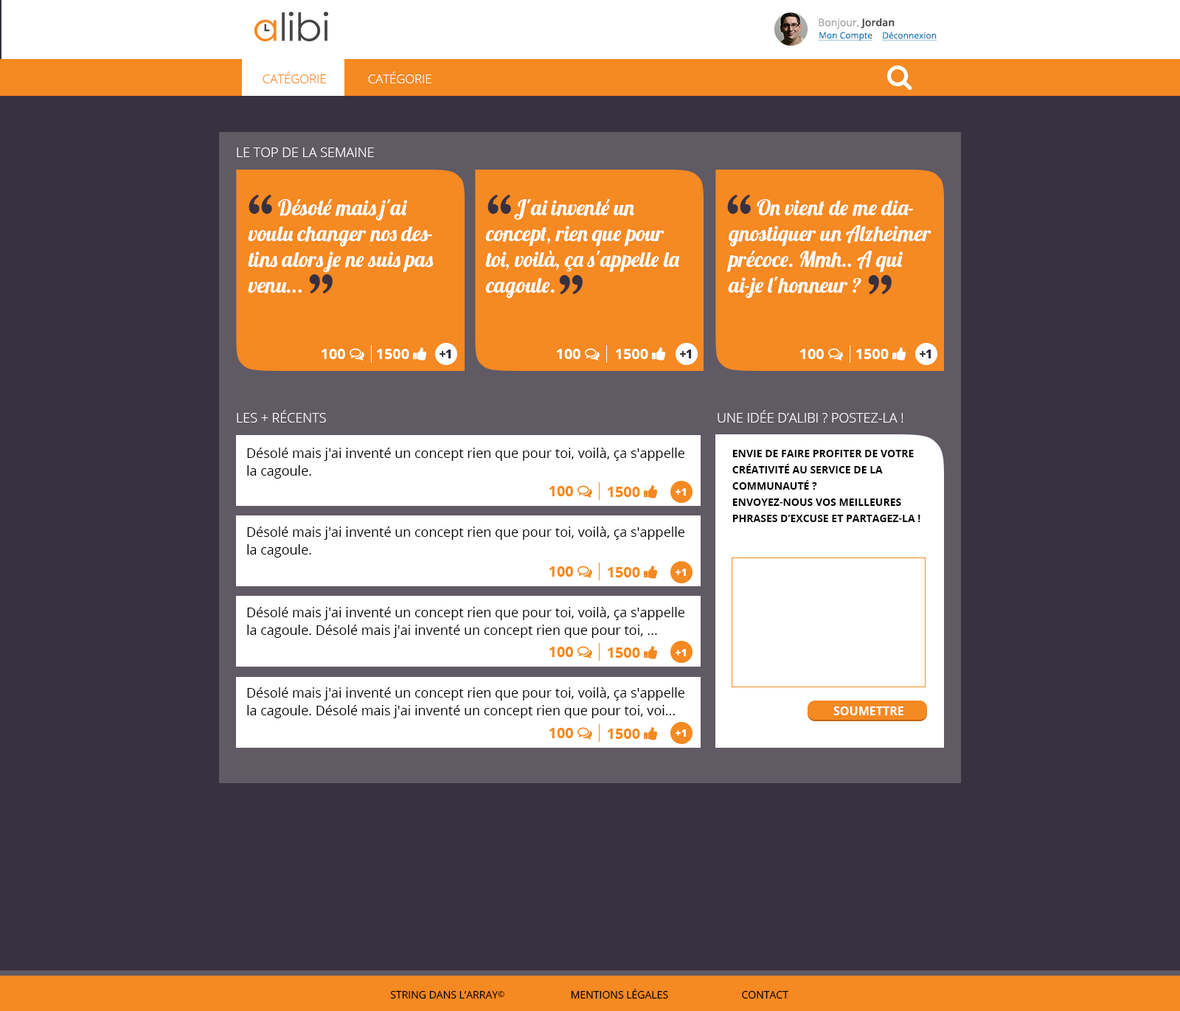
<style>
.page{position:relative;width:1180px;height:1011px;background:#38313f}
.page>*{position:absolute;margin:0}
.t1{font:10.3px "OpenSans";color:#a2a2a2}
.t2{font:10.3px "OpenSans-Semibold";color:#444444}
.t3{font:8.8px "OpenSans";color:#0f7ab4;text-decoration:underline}
.t4{font:12.3px "OpenSans-Light";color:#f58922;text-transform:uppercase}
.t5{font:12.3px "OpenSans-Light";color:#ffffff;text-transform:uppercase}
.t6{font:13.3px "OpenSans-Light";color:#ffffff;text-transform:uppercase}
.t7{font:54.6px "HoeflerText-Black";letter-spacing:-0.08em;color:#38313f;text-transform:uppercase}
.t8{font:21.4px "Lobster1.4";color:#ffffff}
.t9{font:14.7px "OpenSans-Extrabold";color:#ffffff;text-transform:uppercase}
.t10{font:11.8px "OpenSans-Extrabold";letter-spacing:-0.025em;color:#38313f;text-transform:uppercase}
.t11{font:13.3px/17.7px "OpenSans";color:#000000}
.t12{font:10.3px/16.2px "OpenSans-Bold";color:#000000;text-transform:uppercase}
.t13{font:10.3px "OpenSans-Extrabold";color:#ffffff;text-transform:uppercase}
.t14{font:11.8px "OpenSans-Bold";color:#ffffff;text-transform:uppercase}
.t15{font:10.3px "OpenSans";color:#000000;text-transform:uppercase}
.t16{font:8.1px "OpenSans";color:#000000;text-transform:uppercase}
</style>
<div class="page">
<p class="t1" style="left:818px;top:18px;width:76px;height:11px">Bonjour, <span class="t2">Jordan</span></p>
<p class="t3" style="left:818px;top:32px;width:54px;height:9px">Mon Compte</p>
<p class="t3" style="left:882px;top:32px;width:55px;height:9px">Déconnexion</p>
<p class="t4" style="left:262px;top:72px;width:64px;height:11px">Catégorie</p>
<p class="t5" style="left:368px;top:72px;width:63px;height:11px">Catégorie</p>
<p class="t6" style="left:237px;top:147px;width:137px;height:10px">LE top de la Semaine</p>
<p class="t7" style="left:248px;top:195px;width:24px;height:19px">“</p>
<p class="t7" style="left:487px;top:195px;width:24px;height:19px">“</p>
<p class="t7" style="left:727px;top:195px;width:24px;height:19px">“</p>
<p class="t8" style="left:248px;top:199px;width:186px;height:94px"><span class="t9">    </span>   Désolé mais j'ai voulu changer nos destins alors je ne suis pas venu...</p>
<p class="t8" style="left:485px;top:199px;width:195px;height:100px">J'ai inventé un concept, rien que pour toi, voilà, ça s'appelle la cagoule.</p>
<p class="t8" style="left:726px;top:199px;width:205px;height:100px">On vient de me diagnostiquer un Alzheimer<br>précoce. Mmh.. A qui<br>ai-je l'honneur ?</p>
<p class="t7" style="left:309px;top:274px;width:24px;height:19px;rotate:180deg">“</p>
<p class="t7" style="left:559px;top:275px;width:23px;height:19px;rotate:180deg">“</p>
<p class="t7" style="left:868px;top:275px;width:23px;height:19px;rotate:180deg">“</p>
<p class="t10" style="left:439px;top:349px;width:12px;height:9px">+1</p>
<p class="t10" style="left:680px;top:349px;width:12px;height:9px">+1</p>
<p class="t10" style="left:919px;top:349px;width:12px;height:9px">+1</p>
<p class="t6" style="left:237px;top:410px;width:89px;height:12px">Les + récents</p>
<p class="t6" style="left:717px;top:410px;width:186px;height:12px">Une idée d’alibi ? Postez-la !</p>
<p class="t11" style="left:247px;top:448px;width:437px;height:31px">Désolé mais j'ai inventé un concept rien que pour toi, voilà, ça s'appelle la cagoule.</p>
<p class="t12" style="left:732px;top:450px;width:188px;height:72px">Envie de faire profiter de votre créativité au service de la communauté ?<br>Envoyez-nous vos meilleures phrases d’excuse et partagez-la !</p>
<p class="t13" style="left:675px;top:488px;width:11px;height:7px">+1</p>
<p class="t11" style="left:247px;top:526px;width:437px;height:31px">Désolé mais j'ai inventé un concept rien que pour toi, voilà, ça s'appelle la cagoule.</p>
<p class="t13" style="left:675px;top:568px;width:11px;height:8px">+1</p>
<p class="t11" style="left:247px;top:607px;width:437px;height:31px">Désolé mais j'ai inventé un concept rien que pour toi, voilà, ça s'appelle la cagoule. Désolé mais j'ai inventé un concept rien que pour toi, ...</p>
<p class="t13" style="left:675px;top:649px;width:11px;height:7px">+1</p>
<p class="t11" style="left:247px;top:687px;width:437px;height:31px">Désolé mais j'ai inventé un concept rien que pour toi, voilà, ça s'appelle la cagoule. Désolé mais j'ai inventé un concept rien que pour toi, voi... ça...</p>
<p class="t14" style="left:833px;top:706px;width:70px;height:9px">Soumettre</p>
<p class="t13" style="left:675px;top:729px;width:11px;height:8px">+1</p>
<p class="t15" style="left:571px;top:988px;width:97px;height:11px">Mentions légales</p>
<p class="t15" style="left:390px;top:990px;width:114px;height:9px">String dans l’array<span class="t16">©</span></p>
<p class="t15" style="left:742px;top:990px;width:46px;height:9px">Contact</p>
</div>
